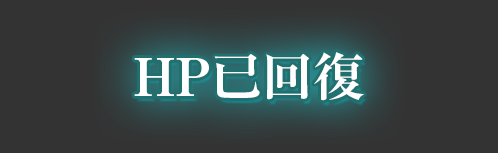
<style>
.page{position:relative;width:498px;height:153px;background:#333333}
.page>*{position:absolute;margin:0}
.t1{font:52px "RyuminPro-ExBold";color:#ffffff}
</style>
<div class="page">
<p class="t1" style="left:134px;top:52px;width:230px;height:49px">HP已回復</p>
</div>
